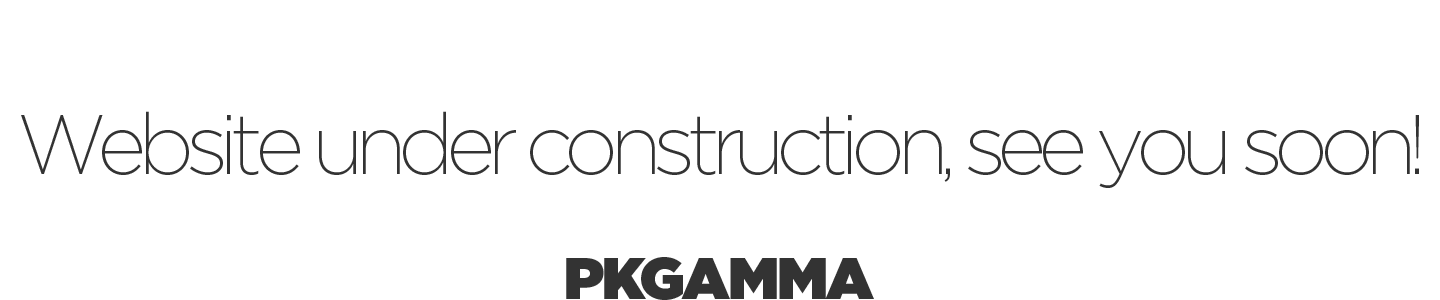
<style>
.page{position:relative;width:1440px;height:300px;background:#ffffff}
.page>*{position:absolute;margin:0}
.t1{font:85px "Gotham-ExtraLight";letter-spacing:-0.1em;color:#333333}
.t2{font:59px "Gotham-Ultra";letter-spacing:-0.035em;color:#333333}
</style>
<div class="page">
<p class="t1" style="left:21px;top:111px;width:1398px;height:77px">Website under construction, see you soon!</p>
<p class="t2" style="left:566px;top:257px;width:308px;height:43px">PKGAMMA</p>
</div>
